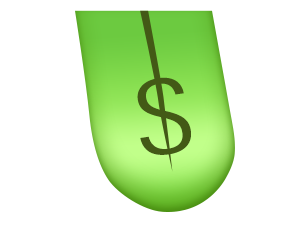
<style>
.page{position:relative;width:284px;height:242px;background:#ffffff}
.page>*{position:absolute;margin:0}
.t1{font:110px "AcuminConcept-CondensedLight";letter-spacing:0.025em;color:#435916;text-transform:uppercase;scale:1.3 1}
</style>
<div class="page">
<p class="t1" style="left:137px;top:77px;width:54px;height:78px;rotate:-8deg">S</p>
</div>
